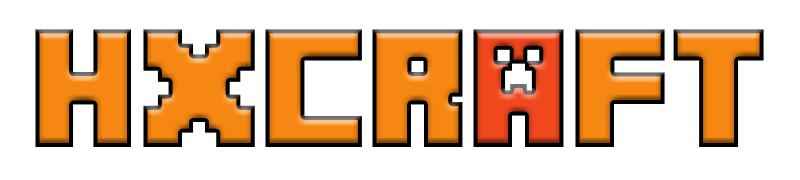
<style>
.page{position:relative;width:800px;height:180px;background:#ffffff}
.page>*{position:absolute;margin:0}
.t1{font:150px "Minecrafter"}
</style>
<div class="page">
<p class="t1" style="left:35px;top:29px;width:729px;height:118px">hXcRaFT</p>
</div>
